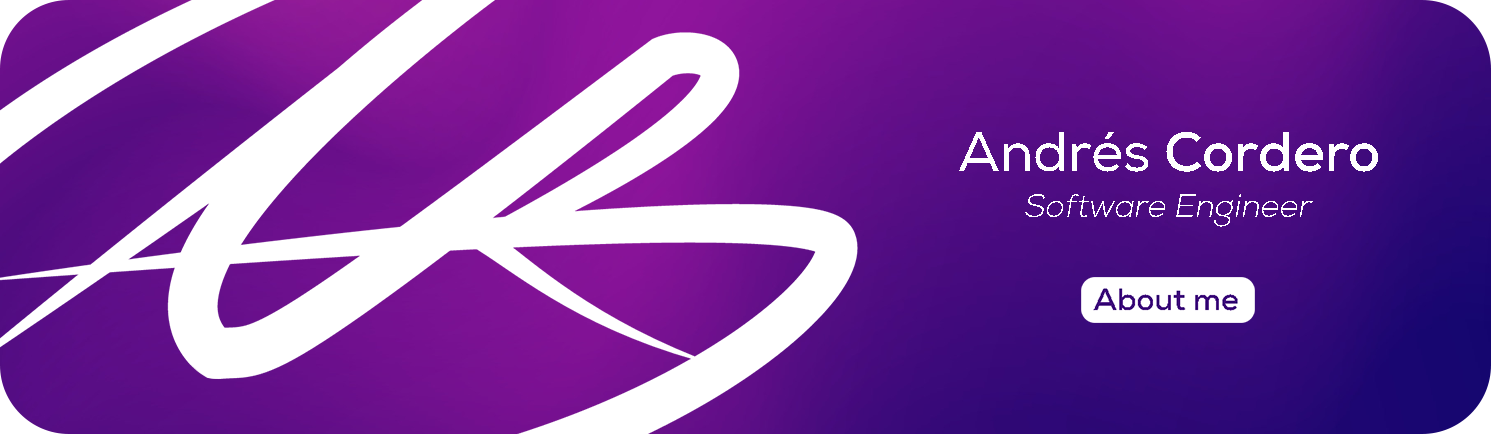
<style>
.page{position:relative;width:1491px;height:434px}
.page>*{position:absolute;margin:0}
.t1{font:55.1px "Nexa-Bold";color:#ffffff}
.t2{font:55.1px "NexaRegular";color:#ffffff}
.t3{font:32.5px "Nexa-Light";color:#ffffff;font-style:italic}
</style>
<div class="page">
<p class="t1" style="left:959px;top:132px;width:419px;height:40px"><span class="t2">Andrés </span>Cordero</p>
<p class="t3" style="left:1025px;top:194px;width:288px;height:33px">Software Engineer</p>
</div>
